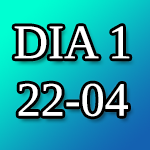
<style>
.page{position:relative;width:150px;height:150px}
.page>*{position:absolute;margin:0}
.t1{font:48px "LiberationSerif";color:#ffffff}
</style>
<div class="page">
<p class="t1" style="left:14px;top:26px;width:116px;height:91px;text-align:center">DIA 1<br>22-04</p>
</div>
